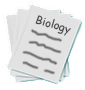
<style>
.page{position:relative;width:85px;height:90px;background:#ffffff}
.page>*{position:absolute;margin:0}
.t1{font:11px "ComicSansMS";color:#454545}
</style>
<div class="page">
<p class="t1" style="left:35px;top:15px;width:36px;height:21px;rotate:17deg">Biology</p>
</div>
